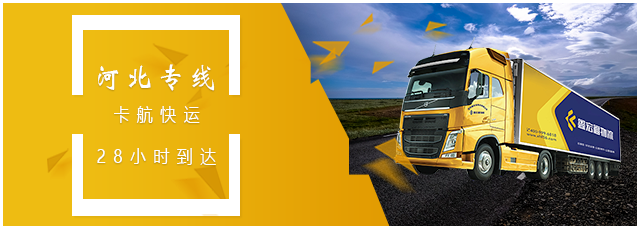
<style>
.page{position:relative;width:640px;height:229px}
.page>*{position:absolute;margin:0}
.t1{font:30px "STXinwei";letter-spacing:0.18em;color:#fffffe;scale:0.89 1}
.t2{font:18px "MicrosoftYaHei";letter-spacing:0.46em;color:#fffffe;scale:0.89 1}
</style>
<div class="page">
<p class="t1" style="left:98px;top:64px;width:117px;height:27px">河北专线</p>
<p class="t2" style="left:114px;top:106px;width:86px;height:17px">卡航快运</p>
<p class="t2" style="left:97px;top:148px;width:119px;height:17px">28小时到达</p>
</div>
